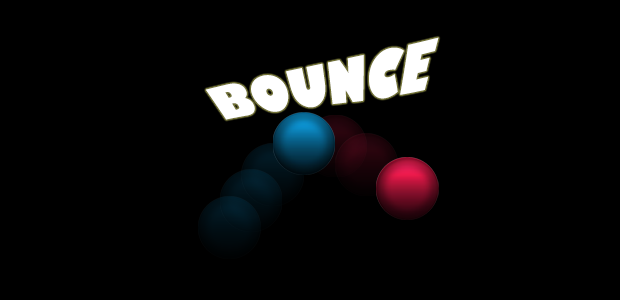
<style>
.page{position:relative;width:620px;height:300px;background:#000000}
.page>*{position:absolute;margin:0}
.t1{font:54.9px "GillSans-UltraBold";color:#ffffff;text-transform:uppercase;scale:0.79 1}
</style>
<div class="page">
<p class="t1" style="left:206px;top:37px;width:233px;height:83px;rotate:-10deg">Bounce</p>
</div>
